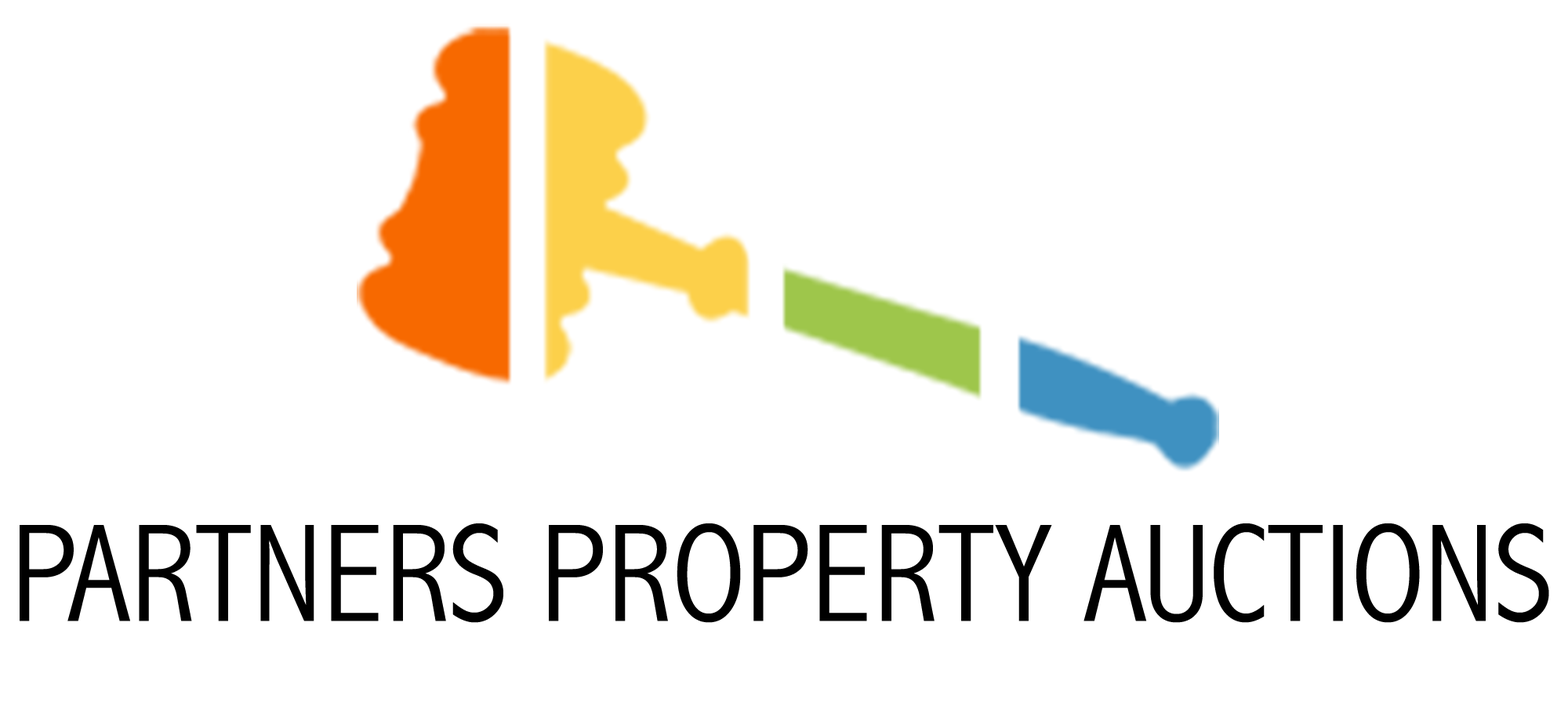
<style>
.page{position:relative;width:1568px;height:713px;background:#ffffff}
.page>*{position:absolute;margin:0}
.t1{font:141.1px "AbadiMT-CondensedLight";color:#000000}
</style>
<div class="page">
<p class="t1" style="left:20px;top:524px;width:1529px;height:99px">PARTNERS PROPERTY AUCTIONS</p>
</div>
